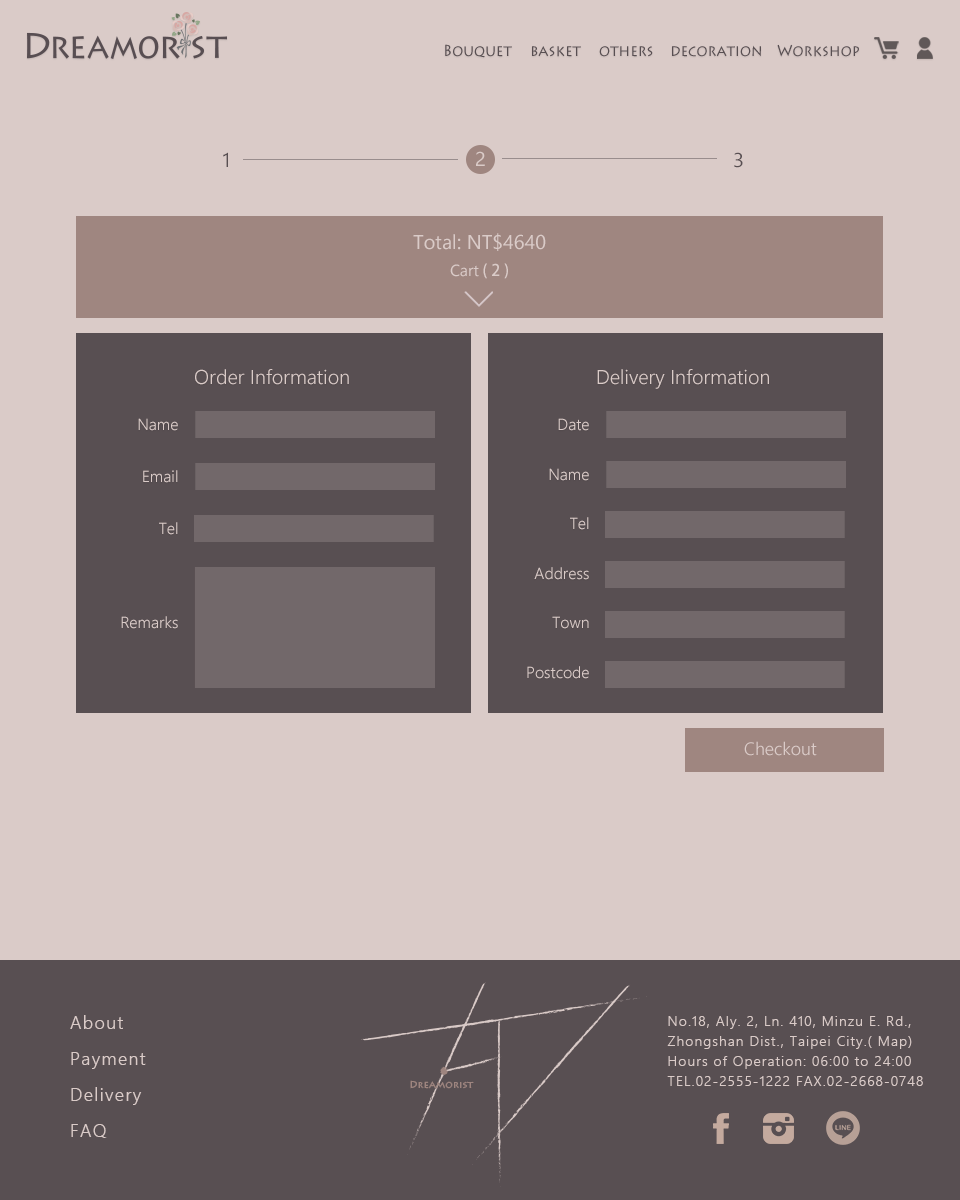
<style>
.page{position:relative;width:960px;height:1200px;background:#dacbc8}
.page>*{position:absolute;margin:0}
.t1{font:16px "LithosPro-Regular";color:#584f52;scale:0.9 1}
.t2{font:16px "LithosPro-Regular";color:#584f52}
.t3{font:20px "LeelawadeeUI";color:#584f52}
.t4{font:20px "LeelawadeeUI";color:#dacbc8}
.t5{font:16px "AdobeHeitiStd-Regular";color:#dacbc8}
.t6{font:16px "LeelawadeeUI";color:#dacbc8}
.t7{font:20px "LeelawadeeUI-Semilight";color:#dacbc8}
.t8{font:16px "LeelawadeeUI-Semilight";color:#dacbc8}
.t9{font:18px "LeelawadeeUI-Semilight";color:#dacbc8}
.t10{font:18px/36px "LeelawadeeUI-Semilight";letter-spacing:0.075em;color:#dacbc8}
.t11{font:14px/20px "LeelawadeeUI-Semilight";letter-spacing:0.075em;color:#dacbc8}
</style>
<div class="page">
<p class="t1" style="left:445px;top:44px;width:67px;height:14px">Bouquet<br><span class="t2">Ha</span></p>
<p class="t1" style="left:532px;top:46px;width:49px;height:11px">basket<br><span class="t2">Ha</span></p>
<p class="t1" style="left:599px;top:46px;width:54px;height:11px">others<br><span class="t2">Ha</span></p>
<p class="t1" style="left:672px;top:45px;width:89px;height:12px">decoration<br><span class="t2">Ha</span></p>
<p class="t1" style="left:777px;top:44px;width:82px;height:13px">Workshop<br><span class="t2">Ha</span></p>
<p class="t3" style="left:223px;top:152px;width:5px;height:15px">1</p>
<p class="t4" style="left:476px;top:151px;width:9px;height:15px">2</p>
<p class="t3" style="left:734px;top:152px;width:9px;height:16px">3</p>
<p class="t4" style="left:413px;top:233px;width:133px;height:18px">Total: NT$4640</p>
<p class="t5" style="left:450px;top:263px;width:58px;height:16px"><span class="t6">Cart</span> ( 2 )</p>
<p class="t7" style="left:195px;top:369px;width:154px;height:16px">Order Information</p>
<p class="t7" style="left:597px;top:369px;width:172px;height:20px">Delivery Information</p>
<p class="t8" style="left:138px;top:418px;width:40px;height:13px">Name</p>
<p class="t8" style="left:558px;top:418px;width:31px;height:13px">Date</p>
<p class="t8" style="left:143px;top:470px;width:35px;height:13px">Email</p>
<p class="t8" style="left:549px;top:468px;width:40px;height:13px">Name</p>
<p class="t8" style="left:570px;top:517px;width:19px;height:13px">Tel</p>
<p class="t8" style="left:159px;top:522px;width:19px;height:13px">Tel</p>
<p class="t8" style="left:534px;top:567px;width:55px;height:13px">Address</p>
<p class="t8" style="left:121px;top:616px;width:57px;height:13px">Remarks</p>
<p class="t8" style="left:552px;top:616px;width:37px;height:13px">Town</p>
<p class="t8" style="left:527px;top:666px;width:62px;height:13px">Postcode</p>
<p class="t9" style="left:744px;top:741px;width:73px;height:15px">Checkout</p>
<p class="t10" style="left:70px;top:1015px;width:76px;height:123px">About<br>Payment<br>Delivery<br>FAQ</p>
<p class="t11" style="left:667px;top:1016px;width:256px;height:70px">No.18, Aly. 2, Ln. 410, Minzu E. Rd., Zhongshan Dist., Taipei City.( Map) <br>Hours of Operation: 06:00 to 24:00 <br>TEL.02-2555-1222 FAX.02-2668-0748</p>
</div>
